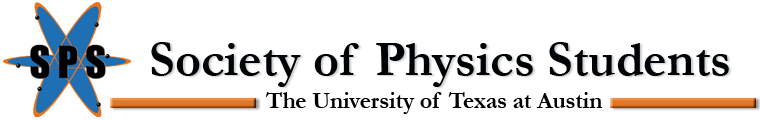
<style>
.page{position:relative;width:760px;height:120px;background:#ffffff}
.page>*{position:absolute;margin:0}
.t1{font:50px "Garamond-Bold";color:#000305}
.t2{font:23.5px "Garamond-Bold";color:#000000}
</style>
<div class="page">
<p class="t1" style="left:151px;top:42px;width:578px;height:45px">Society of Physics Students</p>
<p class="t2" style="left:266px;top:92px;width:337px;height:22px">The University of Texas at Austin</p>
</div>
